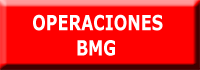
<style>
.page{position:relative;width:200px;height:70px;background:#ff0000}
.page>*{position:absolute;margin:0}
.t1{font:21px "Verdana-Bold";color:#ffffff;scale:0.76 1}
</style>
<div class="page">
<p class="t1" style="left:33px;top:14px;width:130px;height:42px">OPERACIONES<br>         BMG</p>
</div>
